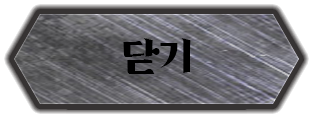
<style>
.page{position:relative;width:313px;height:118px}
.page>*{position:absolute;margin:0}
.t1{font:40px "HSBomBaram3.0Regular";letter-spacing:-0.05em;color:#000000}
</style>
<div class="page">
<p class="t1" style="left:123px;top:38px;width:68px;height:36px">닫기</p>
</div>
